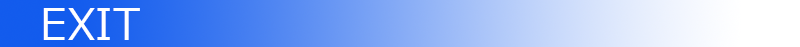
<style>
.page{position:relative;width:800px;height:47px}
.page>*{position:absolute;margin:0}
.t1{font:42.7px "Meiryo";color:#ffffff}
</style>
<div class="page">
<p class="t1" style="left:43px;top:8px;width:97px;height:32px">EXIT</p>
</div>
